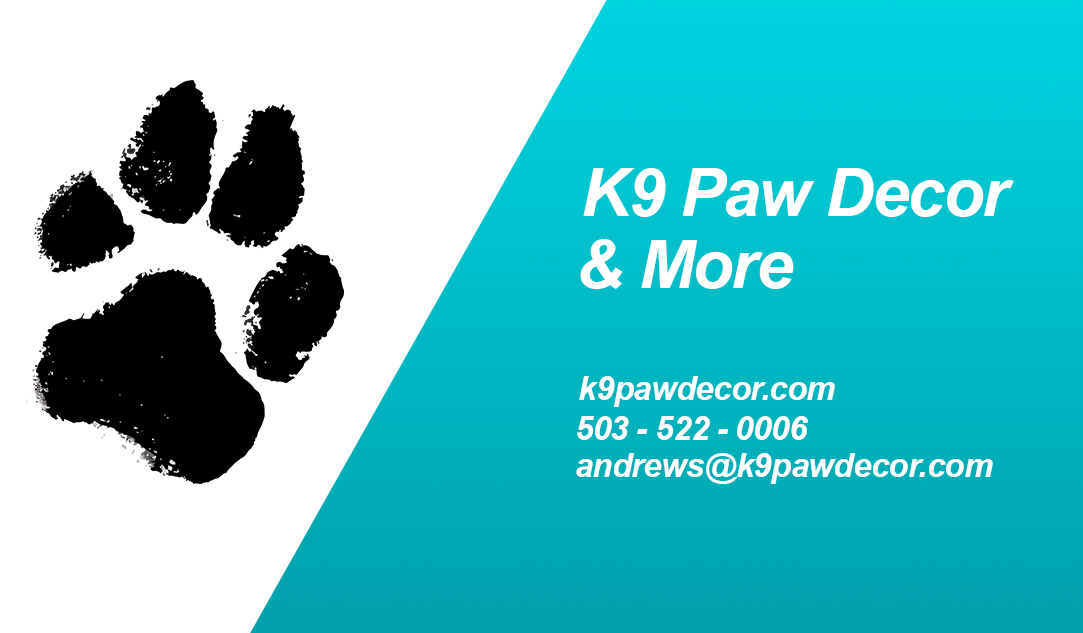
<style>
.page{position:relative;width:1083px;height:633px;background:#ffffff}
.page>*{position:absolute;margin:0}
.t1{font:66.7px "Arial-BoldItalicMT";letter-spacing:-0.025em;color:#ffffff}
.t2{font:33.3px "Arial-BoldItalicMT";letter-spacing:-0.025em;color:#ffffff}
</style>
<div class="page">
<p class="t1" style="left:583px;top:168px;width:431px;height:49px">K9 Paw Decor</p>
<p class="t1" style="left:580px;top:239px;width:214px;height:50px">&amp; More</p>
<p class="t2" style="left:579px;top:376px;width:256px;height:31px">k9pawdecor.com</p>
<p class="t2" style="left:577px;top:416px;width:232px;height:24px">503 - 522 - 0006</p>
<p class="t2" style="left:576px;top:453px;width:417px;height:31px">andrews@k9pawdecor.com</p>
</div>
